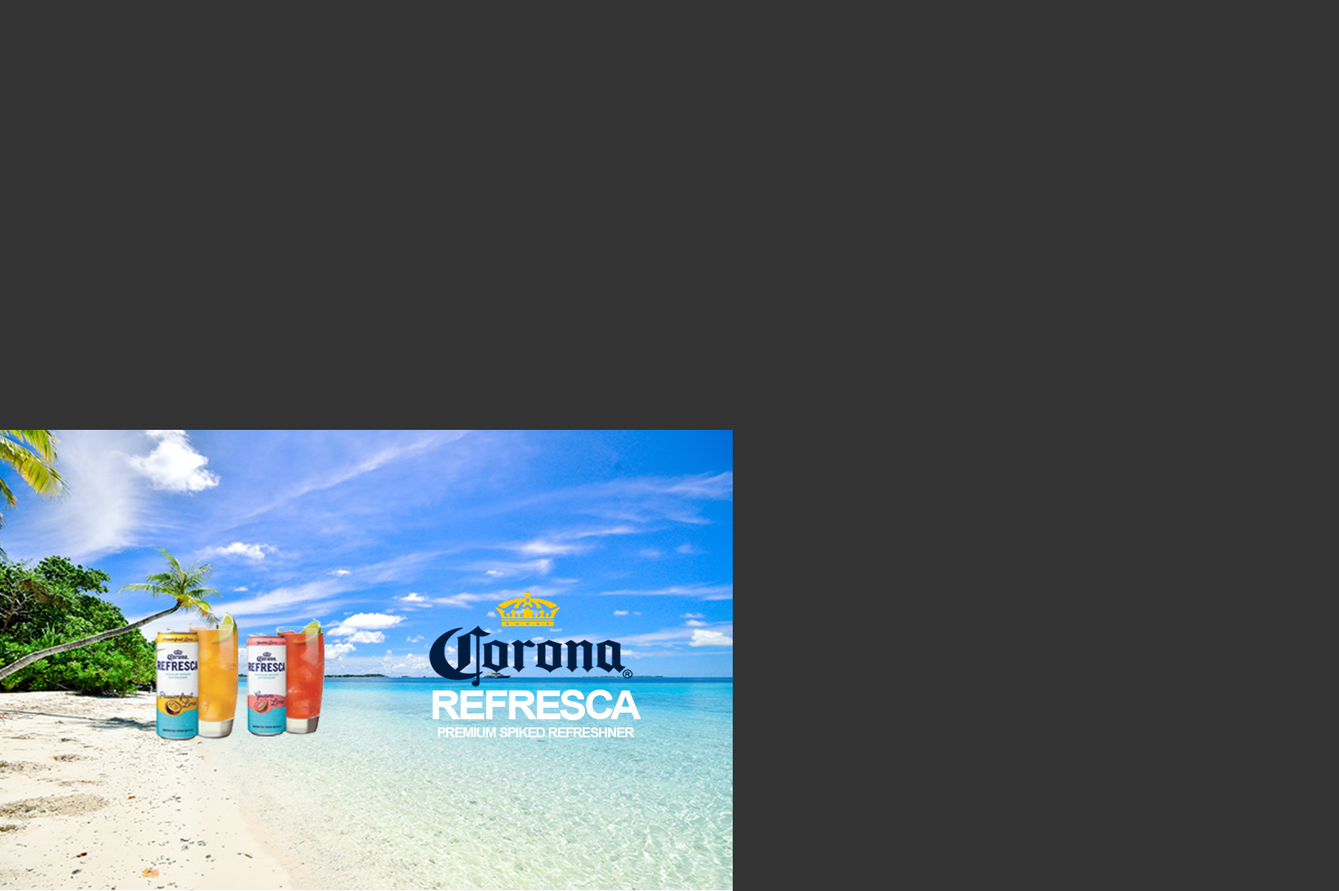
<style>
.page{position:relative;width:1339px;height:891px;background:#333333}
.page>*{position:absolute;margin:0}
.t1{font:39.8px "Arial-BoldMT";letter-spacing:-0.05em;color:#ffffff;scale:1.07 1}
.t2{font:12.7px "Arial-BoldMT";letter-spacing:-0.05em;color:#ffffff;scale:1.07 1}
</style>
<div class="page">
<p class="t1" style="left:432px;top:689px;width:210px;height:31px">REFRESCA</p>
<p class="t2" style="left:438px;top:727px;width:196px;height:10px">PREMIUM SPIKED REFRESHNER</p>
</div>
